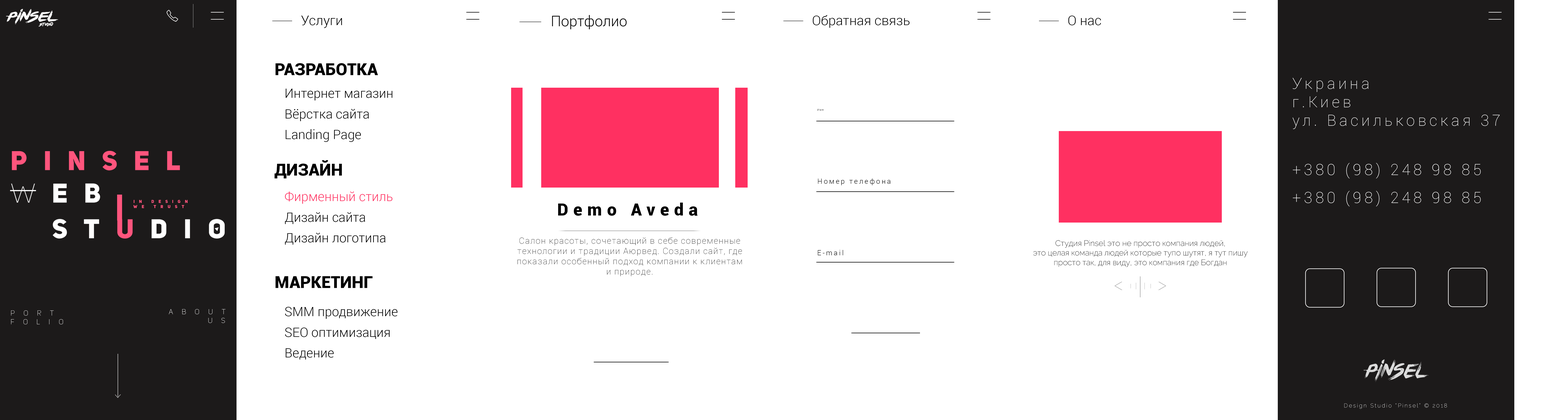
<style>
.page{position:relative;width:1568px;height:420px;background:#ffffff}
.page>*{position:absolute;margin:0}
.t1{font:13.4px "Roboto-Light";color:#000000}
.t2{font:14.6px "Roboto-Light";color:#000000}
.t3{font:16.8px "Roboto-Black";color:#000000}
.t4{font:15.4px "Roboto-Thin";letter-spacing:0.2em;color:#ffffff}
.t5{font:12.9px "Roboto-Light";color:#000000}
.t6{font:2.6px "Roboto-Light";letter-spacing:0.2em;color:#000000}
.t7{font:7.1px "Roboto-Light";letter-spacing:0.2em;color:#000000}
.t8{font:12.9px "Roboto-Light";color:#ff3061}
.t9{font:4.3px "UniSansHeavyCaps";letter-spacing:1em;color:#ff557d;text-transform:uppercase}
.t10{font:17px "Roboto-Black";letter-spacing:0.3em;color:#000000}
.t11{font:8.5px "Roboto-Thin";letter-spacing:0.075em;color:#000000}
.t12{font:8px "Raleway-ExtraLight";color:#000000}
.t13{font:7.2px "UniSansThinCaps";letter-spacing:1.2em;color:#ffffff}
.t14{font:5.5px "Raleway-Thin";letter-spacing:0.2em;color:#ffffff}
</style>
<div class="page">
<p class="t1" style="left:301px;top:16px;width:41px;height:12px">Услуги</p>
<p class="t2" style="left:552px;top:15px;width:75px;height:14px">Портфолио</p>
<p class="t1" style="left:813px;top:15px;width:96px;height:13px">Обратная связь</p>
<p class="t1" style="left:1068px;top:16px;width:33px;height:9px">О нас</p>
<p class="t3" style="left:276px;top:63px;width:102px;height:12px">РАЗРАБОТКА</p>
<p class="t4" style="left:1292px;top:78px;width:208px;height:51px">Украина<br>г.Киев<br>ул. Васильковская 37</p>
<p class="t5" style="left:286px;top:89px;width:106px;height:12px">Интернет магазин</p>
<p class="t5" style="left:286px;top:109px;width:83px;height:12px">Вёрстка сайта</p>
<p class="t6" style="left:817px;top:109px;width:6px;height:2px">Имя</p>
<p class="t5" style="left:286px;top:129px;width:75px;height:13px">Landing Page</p>
<p class="t3" style="left:274px;top:160px;width:68px;height:19px">ДИЗАЙН</p>
<p class="t4" style="left:1293px;top:163px;width:188px;height:16px">+380 (98) 248 98 85</p>
<p class="t7" style="left:818px;top:179px;width:72px;height:6px">Номер телефона</p>
<p class="t8" style="left:285px;top:192px;width:107px;height:12px">Фирменный стиль</p>
<p class="t4" style="left:1293px;top:191px;width:188px;height:16px">+380 (98) 248 98 85</p>
<p class="t9" style="left:133px;top:200px;width:55px;height:8px">in design <br>we trust</p>
<p class="t10" style="left:558px;top:203px;width:140px;height:13px">Demo Aveda</p>
<p class="t5" style="left:285px;top:212px;width:80px;height:12px">Дизайн сайта</p>
<p class="t5" style="left:285px;top:233px;width:100px;height:12px">Дизайн логотипа</p>
<p class="t11" style="left:517px;top:237px;width:225px;height:40px;text-align:center">Салон красоты, сочетающий в себе современные<br>технологии и традиции Аюрвед. Создали сайт, где<br>показали особенный подход компании к клиентам<br>и природе.</p>
<p class="t12" style="left:1033px;top:240px;width:215px;height:27px;text-align:center">Студия Pinsel это не просто компания людей,<br>это целая команда людей которые тупо шутят, я тут пишу<br>просто так, для виду, это компания где Богдан</p>
<p class="t7" style="left:818px;top:250px;width:25px;height:6px">E-mail</p>
<p class="t3" style="left:276px;top:277px;width:96px;height:11px">МАРКЕТИНГ</p>
<p class="t13" style="left:11px;top:311px;width:52px;height:14px">port<br>folio</p>
<p class="t13" style="left:169px;top:309px;width:56px;height:14px;text-align:right">ABOUT<br>US</p>
<p class="t5" style="left:285px;top:307px;width:112px;height:12px">SMM продвижение</p>
<p class="t5" style="left:285px;top:328px;width:105px;height:11px">SEO оптимизация</p>
<p class="t5" style="left:286px;top:349px;width:48px;height:11px">Ведение</p>
<p class="t14" style="left:1344px;top:404px;width:103px;height:5px">Design Studio “Pinsel” © 2018</p>
</div>
